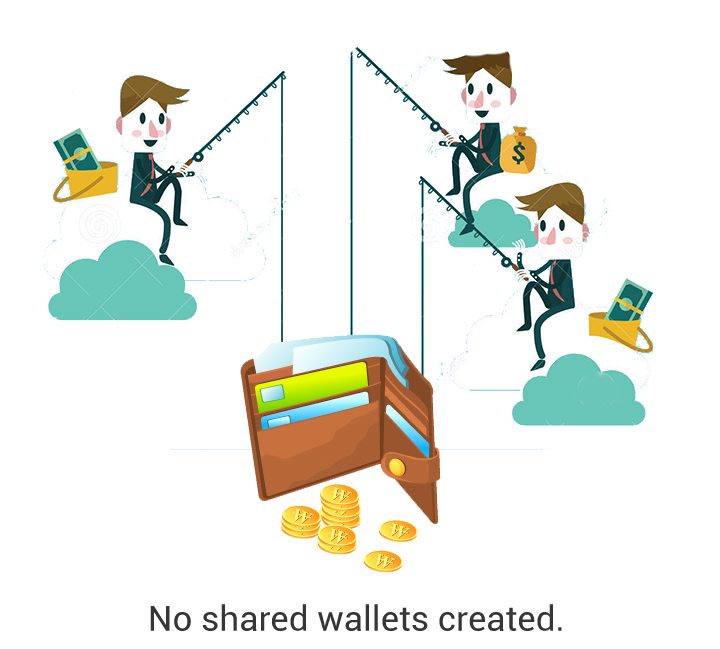
<style>
.page{position:relative;width:720px;height:649px;background:#ffffff}
.page>*{position:absolute;margin:0}
.t1{font:35px "Roboto-Regular";color:#363636}
</style>
<div class="page">
<p class="t1" style="left:150px;top:604px;width:412px;height:27px">No shared wallets created.</p>
</div>
